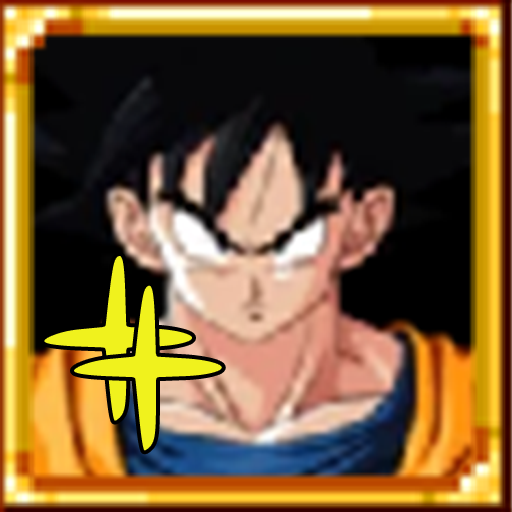
<style>
.page{position:relative;width:512px;height:512px}
.page>*{position:absolute;margin:0}
.t1{font:356.4px "IsaacSans";color:#f0f21d}
</style>
<div class="page">
<p class="t1" style="left:72px;top:283px;width:152px;height:170px">+</p>
</div>
